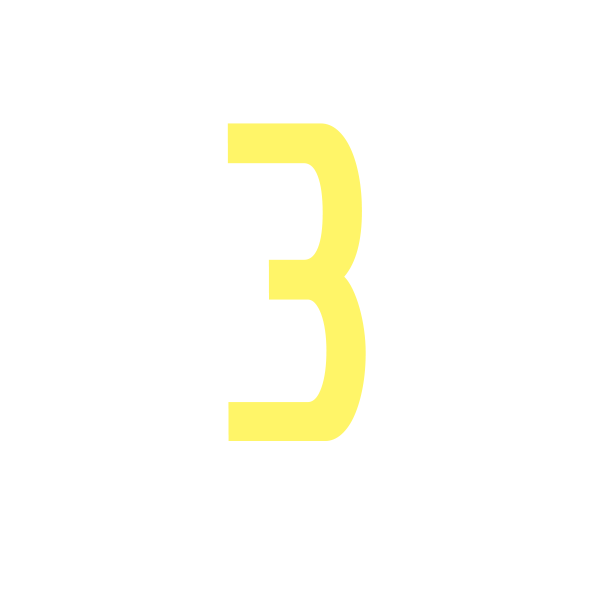
<style>
.page{position:relative;width:600px;height:600px;background:#ffffff}
.page>*{position:absolute;margin:0}
.t1{font:393.2px "Unispace-Bold";color:#fff568;scale:0.67 1}
</style>
<div class="page">
<p class="t1" style="left:227px;top:123px;width:139px;height:318px">3</p>
</div>
